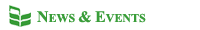
<style>
.page{position:relative;width:200px;height:30px;background:#ffffff}
.page>*{position:absolute;margin:0}
.t1{font:12px "TimesNewRomanPS-BoldMT";color:#399d39}
.t2{font:16px "TimesNewRomanPS-BoldMT";color:#399d39}
</style>
<div class="page">
<p class="t1" style="left:37px;top:11px;width:109px;height:12px"><span class="t2">N</span>EWS <span class="t2">&amp; E</span>VENTS</p>
</div>
